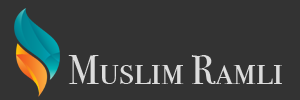
<style>
.page{position:relative;width:300px;height:100px;background:#333333}
.page>*{position:absolute;margin:0}
.t1{font:9.9px "BodoniSvtyTwoSCITCTT-Book";color:#dcdcdc}
</style>
<div class="page">
<p class="t1" style="left:68px;top:55px;width:214px;height:29px">Muslim Ramli</p>
</div>
